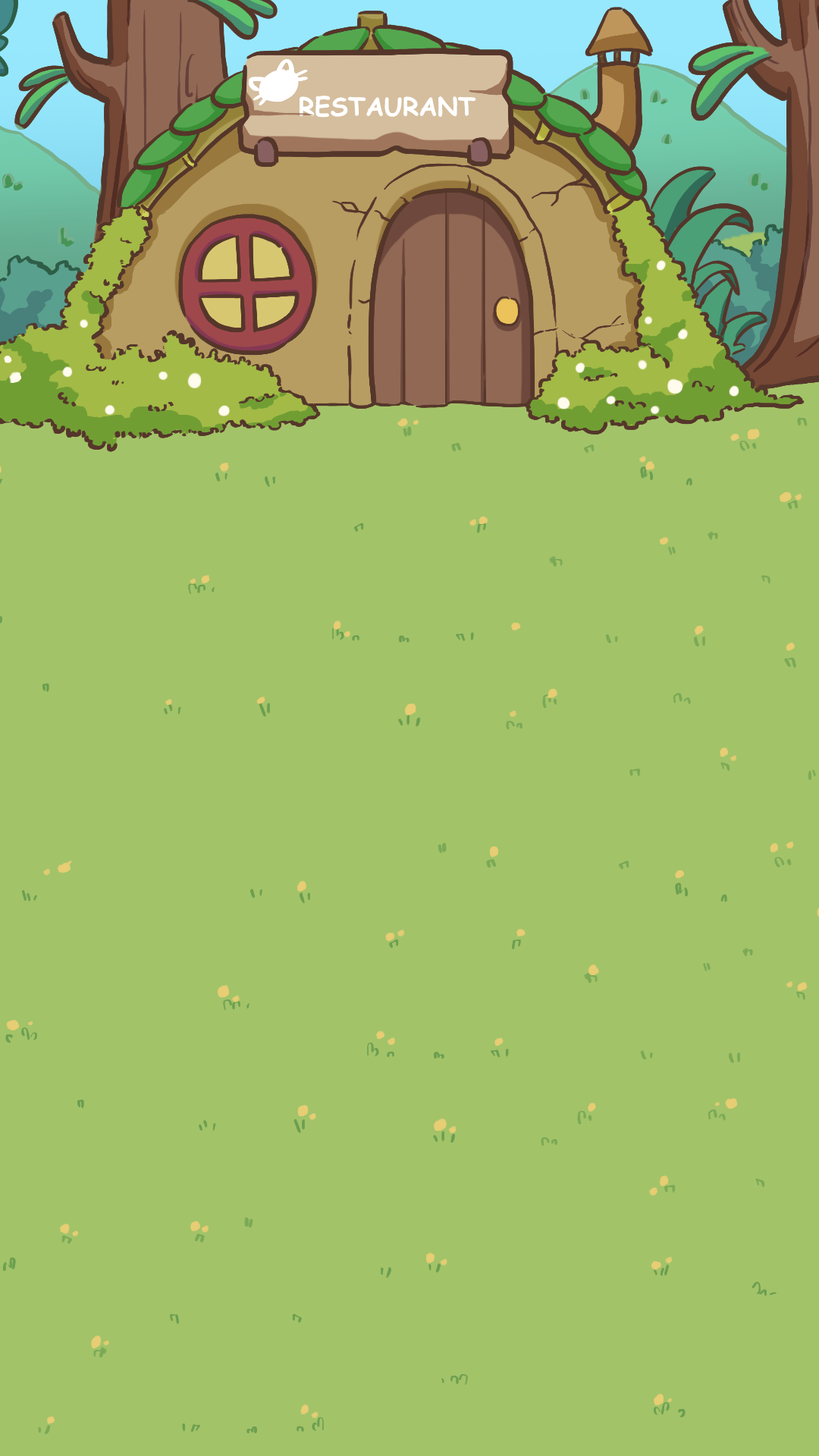
<style>
.page{position:relative;width:819px;height:1456px;background:#a3c369}
.page>*{position:absolute;margin:0}
.t1{font:25.3px "ComicSansMS-Bold";color:#ffffff}
</style>
<div class="page">
<p class="t1" style="left:300px;top:96px;width:176px;height:22px">RESTAURANT</p>
</div>
